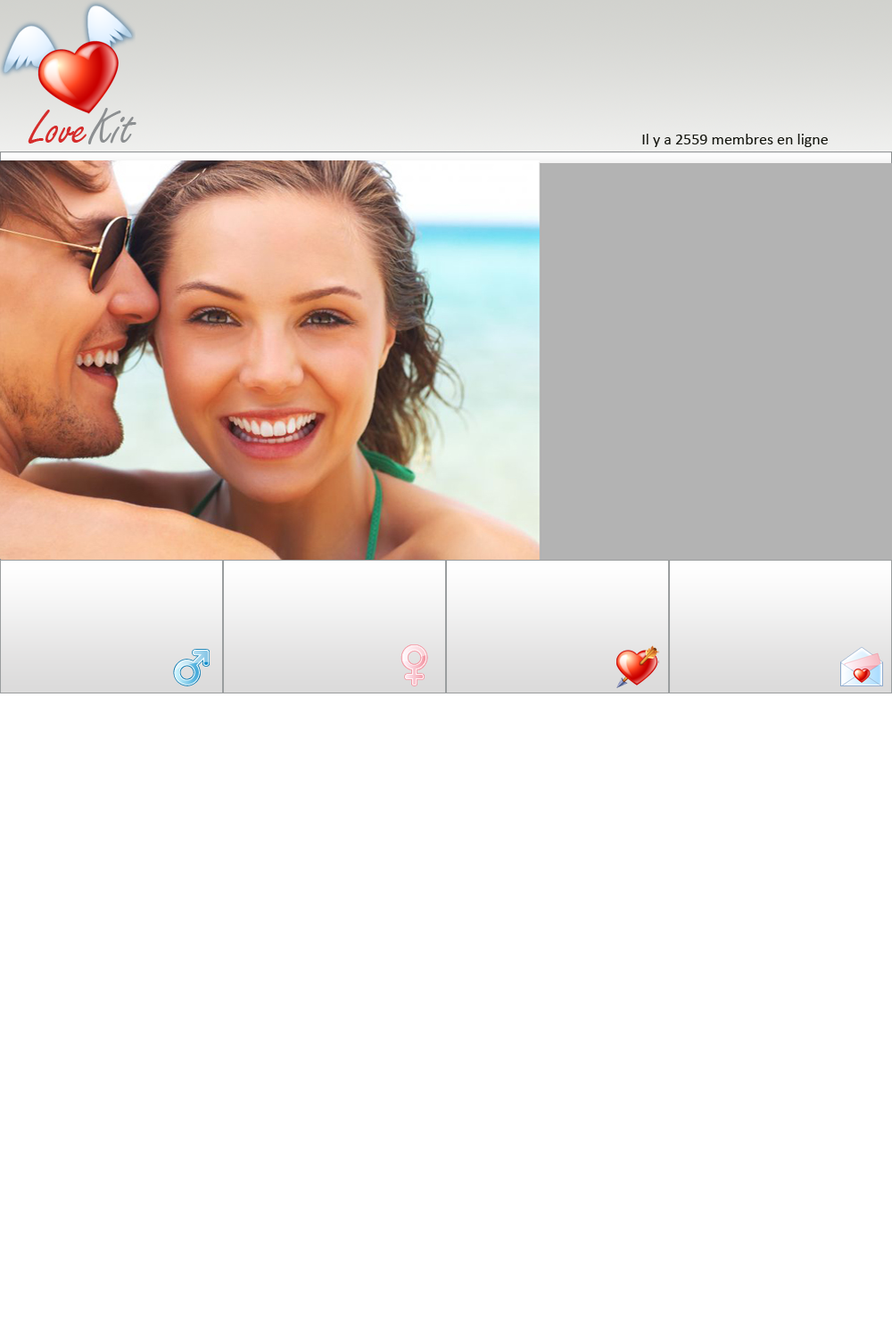
<style>
.page{position:relative;width:892px;height:1337px;background:#ffffff}
.page>*{position:absolute;margin:0}
.t1{font:53.5px "FreestyleScript-Regular";color:#d52c2b}
.t2{font:53.5px "FreestyleScript-Regular";color:#8c8f91}
.t3{font:16px "Calibri";color:#13140d}
</style>
<div class="page">
<p class="t1" style="left:28px;top:108px;width:108px;height:36px">Love<span class="t2">Kit</span></p>
<p class="t3" style="left:642px;top:134px;width:185px;height:13px">Il y a 2559 membres en ligne</p>
</div>
